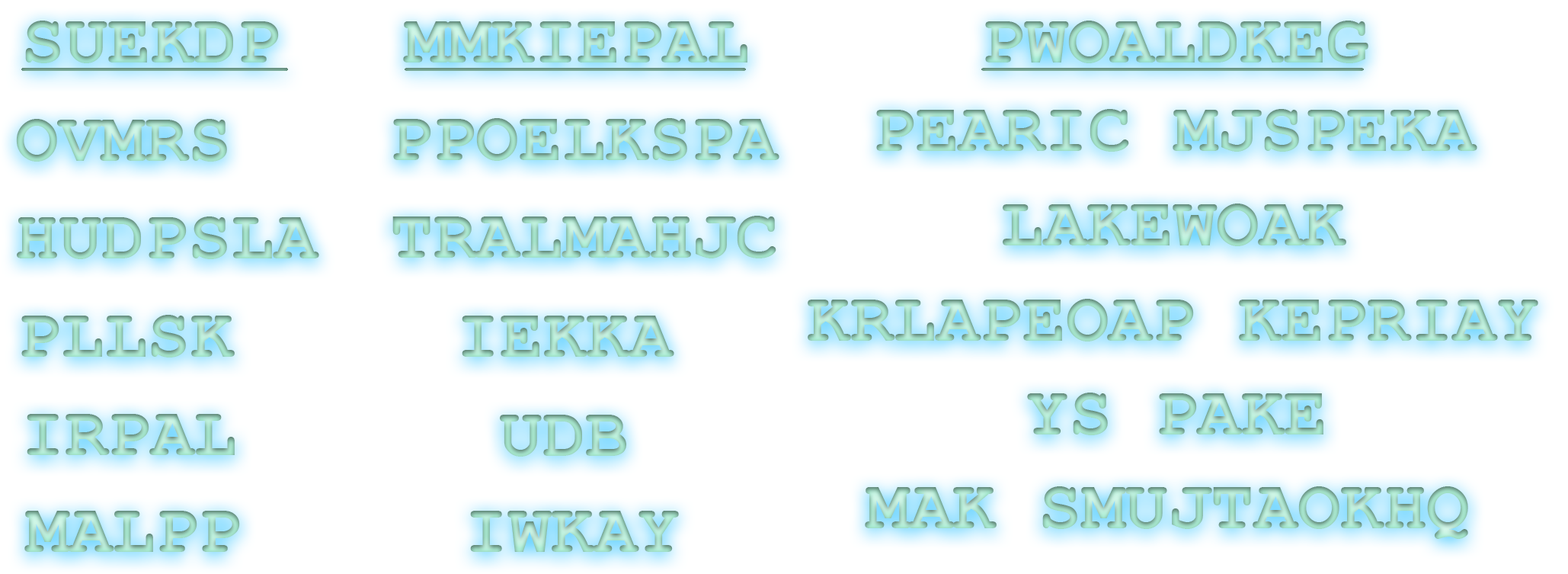
<style>
.page{position:relative;width:1568px;height:574px;background:#ffffff}
.page>*{position:absolute;margin:0}
.t1{font:71.8px "CourierNewPS-BoldMT"}
</style>
<div class="page">
<p class="t1" style="left:25px;top:21px;width:254px;height:42px">SUEKDP</p>
<p class="t1" style="left:403px;top:21px;width:344px;height:41px">MMKIEPAL</p>
<p class="t1" style="left:985px;top:21px;width:383px;height:42px">PWOALDKEG</p>
<p class="t1" style="left:876px;top:109px;width:601px;height:43px">PEARIC MJSPEKA</p>
<p class="t1" style="left:16px;top:119px;width:211px;height:43px">OVMRS</p>
<p class="t1" style="left:393px;top:118px;width:386px;height:43px">PPOELKSPA</p>
<p class="t1" style="left:1003px;top:203px;width:343px;height:43px">LAKEWOAK</p>
<p class="t1" style="left:17px;top:216px;width:302px;height:43px">HUDPSLA</p>
<p class="t1" style="left:392px;top:216px;width:384px;height:42px">TRALMAHJC</p>
<p class="t1" style="left:808px;top:299px;width:730px;height:42px">KRLAPEOAP KEPRIAY</p>
<p class="t1" style="left:21px;top:315px;width:214px;height:42px">PLLSK</p>
<p class="t1" style="left:462px;top:315px;width:212px;height:42px">IEKKA</p>
<p class="t1" style="left:1027px;top:392px;width:296px;height:43px">YS PAKE</p>
<p class="t1" style="left:27px;top:414px;width:208px;height:41px">IRPAL</p>
<p class="t1" style="left:500px;top:414px;width:126px;height:42px">UDB</p>
<p class="t1" style="left:865px;top:486px;width:603px;height:53px">MAK SMUJTAOKHQ</p>
<p class="t1" style="left:24px;top:510px;width:216px;height:42px">MALPP</p>
<p class="t1" style="left:470px;top:510px;width:209px;height:42px">IWKAY</p>
</div>
